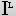
<style>
.page{position:relative;width:16px;height:16px}
.page>*{position:absolute;margin:0}
.t1{font:20.8px "TimesNewRomanPSMT";color:#000000}
.t2{font:8.3px "TimesNewRomanPSMT";color:#000000}
</style>
<div class="page">
<p class="t1" style="left:1px;top:1px;width:8px;height:14px">I</p>
<p class="t2" style="left:8px;top:2px;width:6px;height:6px">L</p>
<p class="t2" style="left:8px;top:2px;width:6px;height:6px">L</p>
</div>
